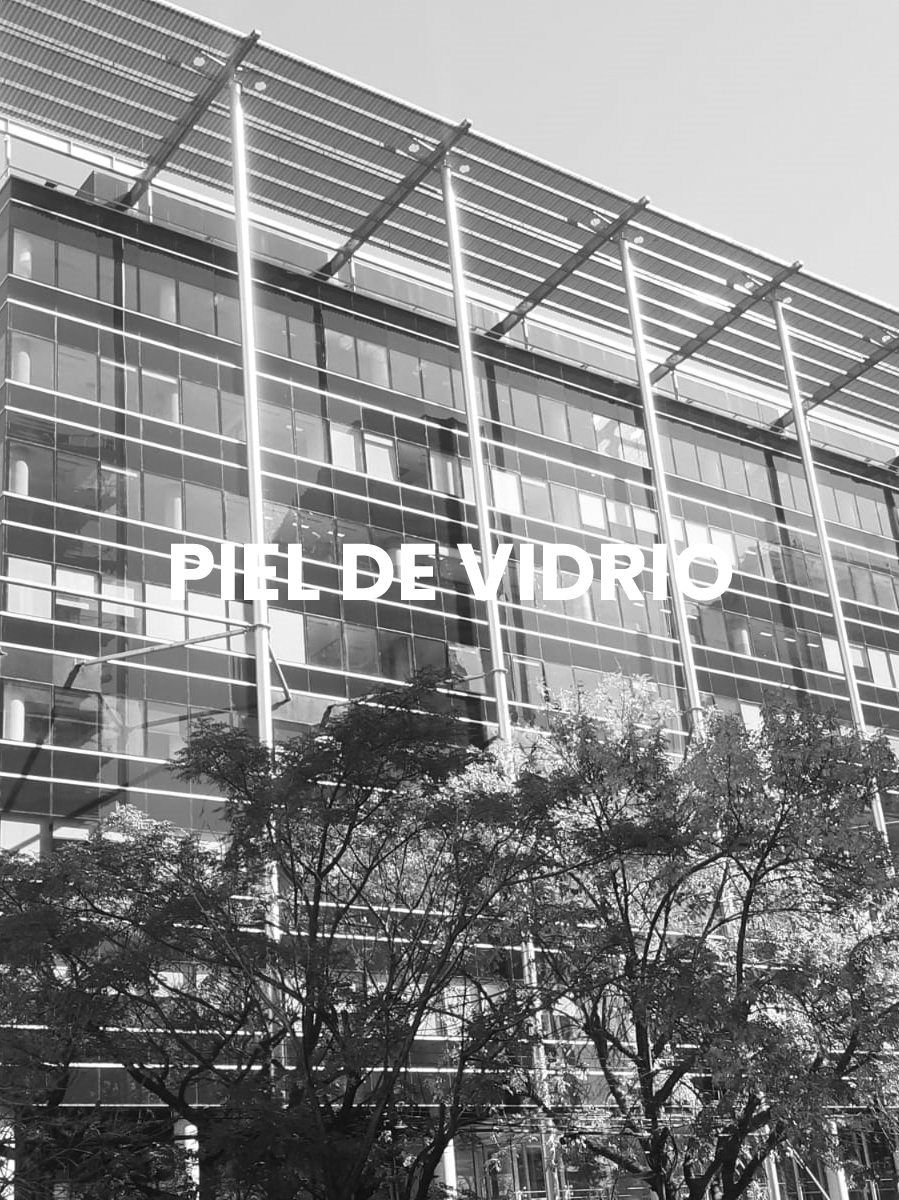
<style>
.page{position:relative;width:899px;height:1200px}
.page>*{position:absolute;margin:0}
.t1{font:80px "Poppins-Bold";color:#ffffff}
</style>
<div class="page">
<p class="t1" style="left:171px;top:543px;width:562px;height:58px">PIEL DE VIDRIO</p>
</div>
